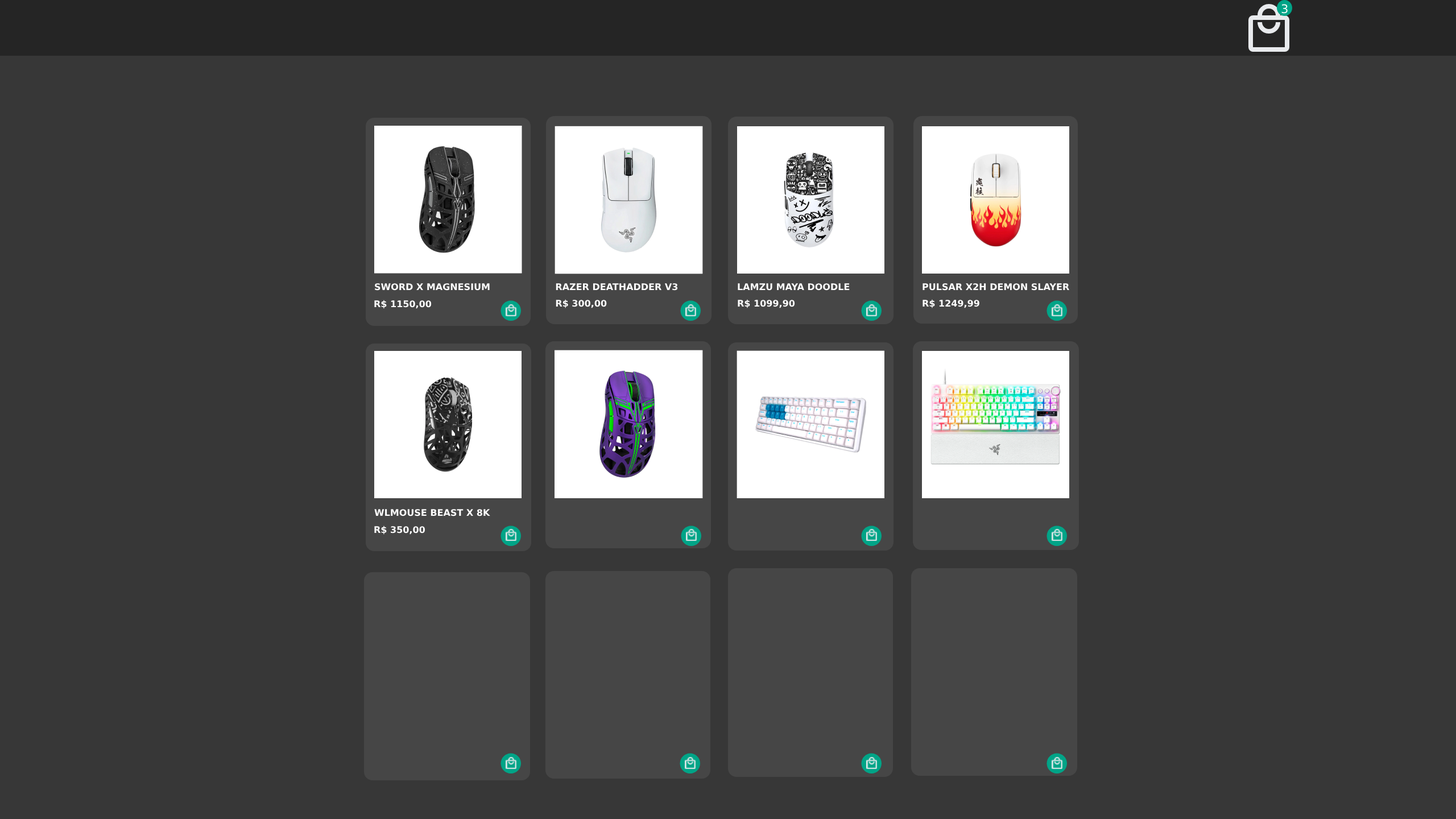
<style>
.page{position:relative;width:1456px;height:819px;background:#373737}
.page>*{position:absolute;margin:0}
.t1{font:11.9px "DejaVuSans";color:#ffffff}
.t2{font:9.1px "DejaVuSans-Bold";color:#ffffff}
</style>
<div class="page">
<p class="t1" style="left:1281px;top:4px;width:7px;height:10px">3</p>
<p class="t2" style="left:375px;top:283px;width:115px;height:8px">SWORD X MAGNESIUM</p>
<p class="t2" style="left:556px;top:283px;width:122px;height:8px">RAZER DEATHADDER V3</p>
<p class="t2" style="left:738px;top:283px;width:112px;height:8px">LAMZU MAYA DOODLE</p>
<p class="t2" style="left:923px;top:283px;width:146px;height:8px">PULSAR X2H DEMON SLAYER</p>
<p class="t2" style="left:374px;top:300px;width:58px;height:9px">R$ 1150,00</p>
<p class="t2" style="left:556px;top:299px;width:51px;height:9px">R$ 300,00</p>
<p class="t2" style="left:738px;top:299px;width:57px;height:9px">R$ 1099,90</p>
<p class="t2" style="left:923px;top:299px;width:56px;height:9px">R$ 1249,99</p>
<p class="t2" style="left:374px;top:509px;width:116px;height:7px">WLMOUSE BEAST X 8K</p>
<p class="t2" style="left:374px;top:526px;width:51px;height:9px">R$ 350,00</p>
</div>
